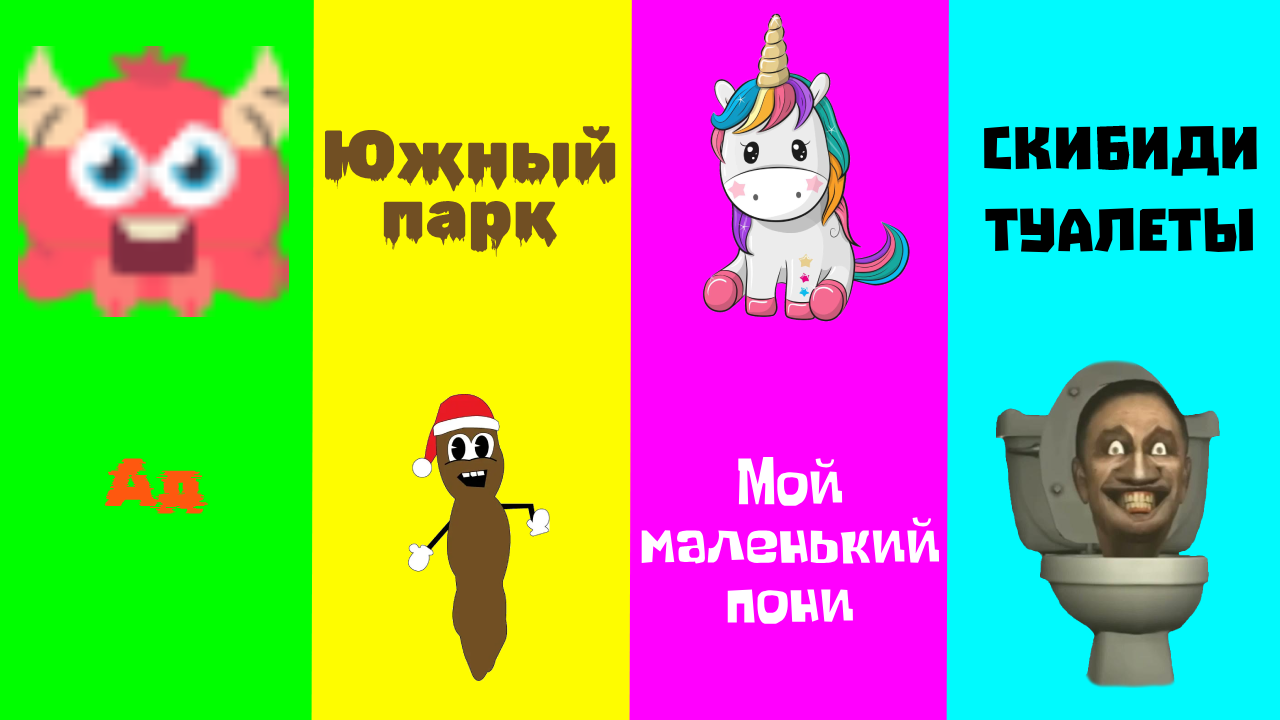
<style>
.page{position:relative;width:1280px;height:720px;background:#fefc00}
.page>*{position:absolute;margin:0}
.t1{font:67.7px/59px "RubikWetPaint-Regular";color:#714f23}
.t2{font:67.7px "Troika";color:#000000}
.t3{font:67.7px "RubikGlitch-Regular";color:#fe580f}
.t4{font:67.7px/59px "SomeTimeLater";color:#ffffff}
</style>
<div class="page">
<p class="t1" style="left:324px;top:126px;width:292px;height:131px;text-align:center">Южный<br>парк</p>
<p class="t2" style="left:984px;top:125px;width:273px;height:128px;text-align:center">Скибиди<br>туалеты</p>
<p class="t3" style="left:104px;top:458px;width:104px;height:56px">Ад</p>
<p class="t4" style="left:641px;top:456px;width:299px;height:168px;text-align:center">Мой <br>маленький<br>пони</p>
</div>
